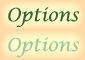
<style>
.page{position:relative;width:85px;height:60px}
.page>*{position:absolute;margin:0}
.t1{font:18px "LucidaCalligraphy-Italic";color:#336633}
.t2{font:18px "LucidaCalligraphy-Italic";color:#99cc99}
</style>
<div class="page">
<p class="t1" style="left:8px;top:7px;width:71px;height:20px">Options</p>
<p class="t2" style="left:8px;top:37px;width:71px;height:20px">Options</p>
</div>
